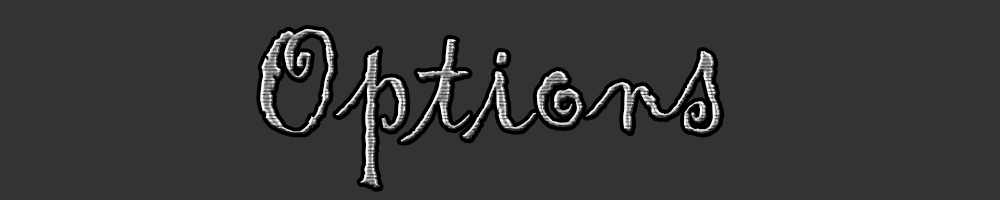
<style>
.page{position:relative;width:1000px;height:200px;background:#333333}
.page>*{position:absolute;margin:0}
.t1{font:148.2px "Gigi-Regular"}
</style>
<div class="page">
<p class="t1" style="left:260px;top:29px;width:461px;height:159px">Options</p>
</div>
